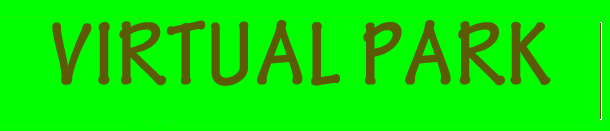
<style>
.page{position:relative;width:610px;height:131px;background:#00ff00}
.page>*{position:absolute;margin:0}
.t1{font:96px "TektonPro-BoldCond";letter-spacing:0.025em;color:#5c5907}
</style>
<div class="page">
<p class="t1" style="left:52px;top:20px;width:499px;height:66px">VIRTUAL PARK</p>
</div>
